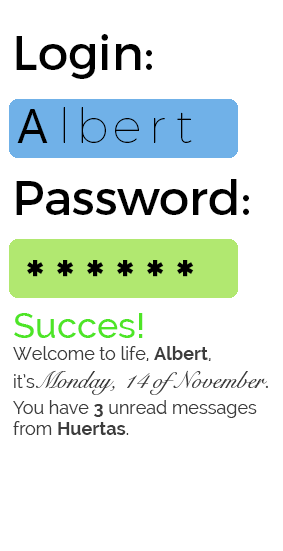
<style>
.page{position:relative;width:283px;height:551px;background:#ffffff}
.page>*{position:absolute;margin:0}
.t1{font:48px "Montserrat-Regular";color:#000000}
.t2{font:48px "Gadugi";color:#000000}
.t3{font:48px "Montserrat-Thin";color:#000000}
.t4{font:48px "Montserrat-Bold";color:#000000}
.t5{font:24px "SnellBT-Regular";color:#3d3d3d}
.t6{font:36px "Raleway-Medium";color:#4ee526}
.t7{font:18px "Raleway";color:#3d3d3d}
.t8{font:18px "Raleway-Bold";color:#3d3d3d}
</style>
<div class="page">
<p class="t1" style="left:16px;top:34px;width:136px;height:45px">Login:</p>
<p class="t2" style="left:17px;top:109px;width:31px;height:34px">A</p>
<p class="t3" style="left:63px;top:107px;width:2px;height:36px">l</p>
<p class="t3" style="left:81px;top:107px;width:25px;height:36px">b</p>
<p class="t3" style="left:177px;top:112px;width:15px;height:31px">t</p>
<p class="t3" style="left:115px;top:118px;width:24px;height:25px">e</p>
<p class="t3" style="left:154px;top:118px;width:11px;height:25px">r</p>
<p class="t1" style="left:16px;top:179px;width:233px;height:36px">Password:</p>
<p class="t4" style="left:27px;top:260px;width:17px;height:17px">*</p>
<p class="t4" style="left:57px;top:260px;width:17px;height:17px">*</p>
<p class="t4" style="left:87px;top:260px;width:17px;height:17px">*</p>
<p class="t4" style="left:117px;top:260px;width:17px;height:17px">*</p>
<p class="t4" style="left:147px;top:260px;width:17px;height:17px">*</p>
<p class="t4" style="left:177px;top:260px;width:17px;height:17px">*</p>
<p class="t5" style="left:13px;top:313px;width:255px;height:82px"><span class="t6">Succes!<br></span><span class="t7">Welcome to life, </span><span class="t8">Albert</span><span class="t7">,<br>it’s  </span>Monday, 14 of November.</p>
<p class="t7" style="left:13px;top:400px;width:244px;height:35px"><span class="t6"><br></span>You have <span class="t8">3</span> unread messages<br>from <span class="t8">Huertas</span>.</p>
</div>
